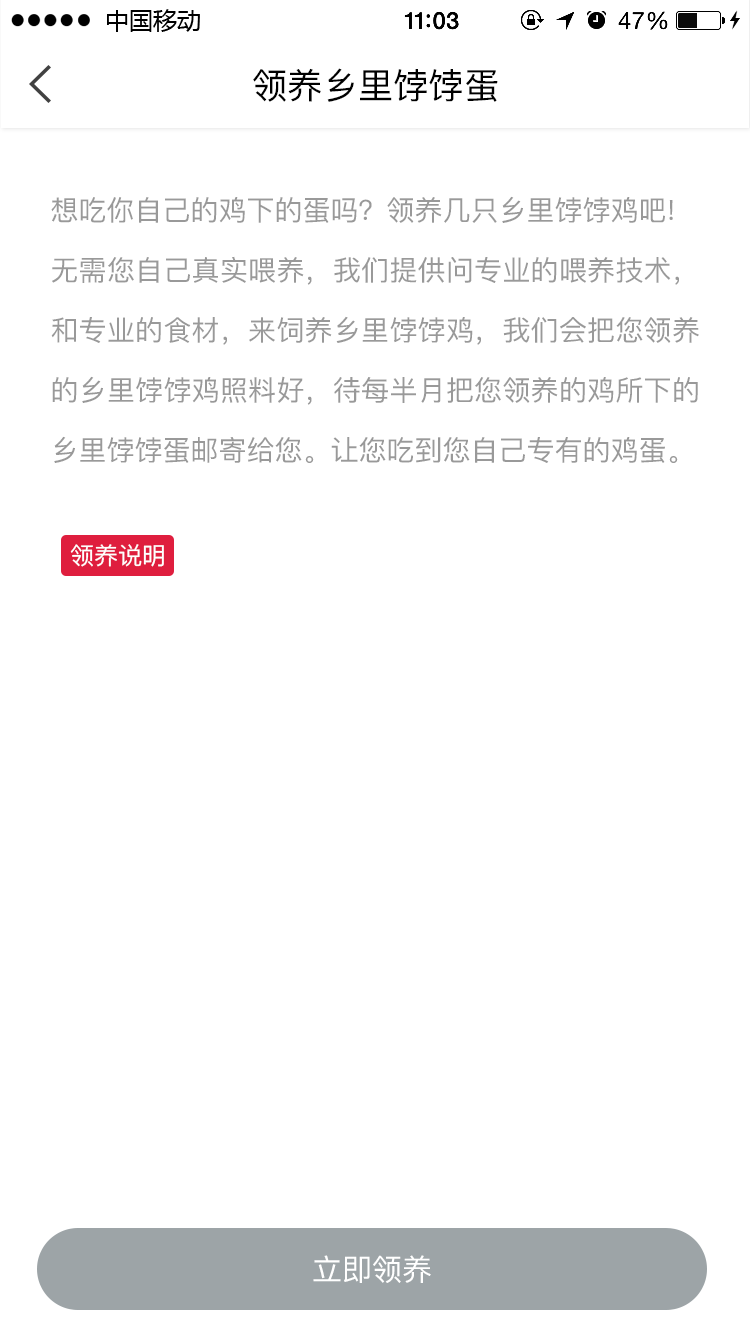
<style>
.page{position:relative;width:750px;height:1334px;background:#ffffff}
.page>*{position:absolute;margin:0}
.t1{font:35.5px "PingFang-SC-Medium";color:#000000}
.t2{font:28px/60px "PingFang-SC-Medium";color:#999999}
.t3{font:24px "PingFang-SC-Medium";color:#ffffff}
.t4{font:30px "PingFang-SC-Medium";color:#ffffff}
</style>
<div class="page">
<p class="t1" style="left:253px;top:68px;width:245px;height:34px">领养乡里饽饽蛋</p>
<p class="t2" style="left:51px;top:196px;width:648px;height:267px;text-align:justify">想吃你自己的鸡下的蛋吗？领养几只乡里饽饽鸡吧!<br>无需您自己真实喂养，我们提供问专业的喂养技术，和专业的食材，来饲养乡里饽饽鸡，我们会把您领养的乡里饽饽鸡照料好，待每半月把您领养的鸡所下的乡里饽饽蛋邮寄给您。让您吃到您自己专有的鸡蛋。</p>
<p class="t3" style="left:70px;top:544px;width:94px;height:23px">领养说明</p>
<p class="t4" style="left:313px;top:1255px;width:118px;height:28px">立即领养</p>
</div>
